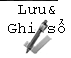
<style>
.page{position:relative;width:71px;height:58px;background:#ffffff}
.page>*{position:absolute;margin:0}
.t1{font:12px "CourierNewPSMT";color:#000000}
</style>
<div class="page">
<p class="t1" style="left:8px;top:5px;width:57px;height:28px;text-align:center">Lưu&amp;<br>Ghi sổ</p>
</div>
